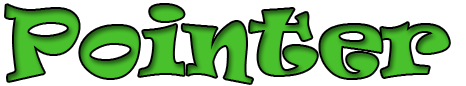
<style>
.page{position:relative;width:466px;height:86px;background:#ffffff}
.page>*{position:absolute;margin:0}
.t1{font:86.8px "Ravie";color:#49c12c}
</style>
<div class="page">
<p class="t1" style="left:6px;top:5px;width:443px;height:78px">Pointer</p>
</div>
